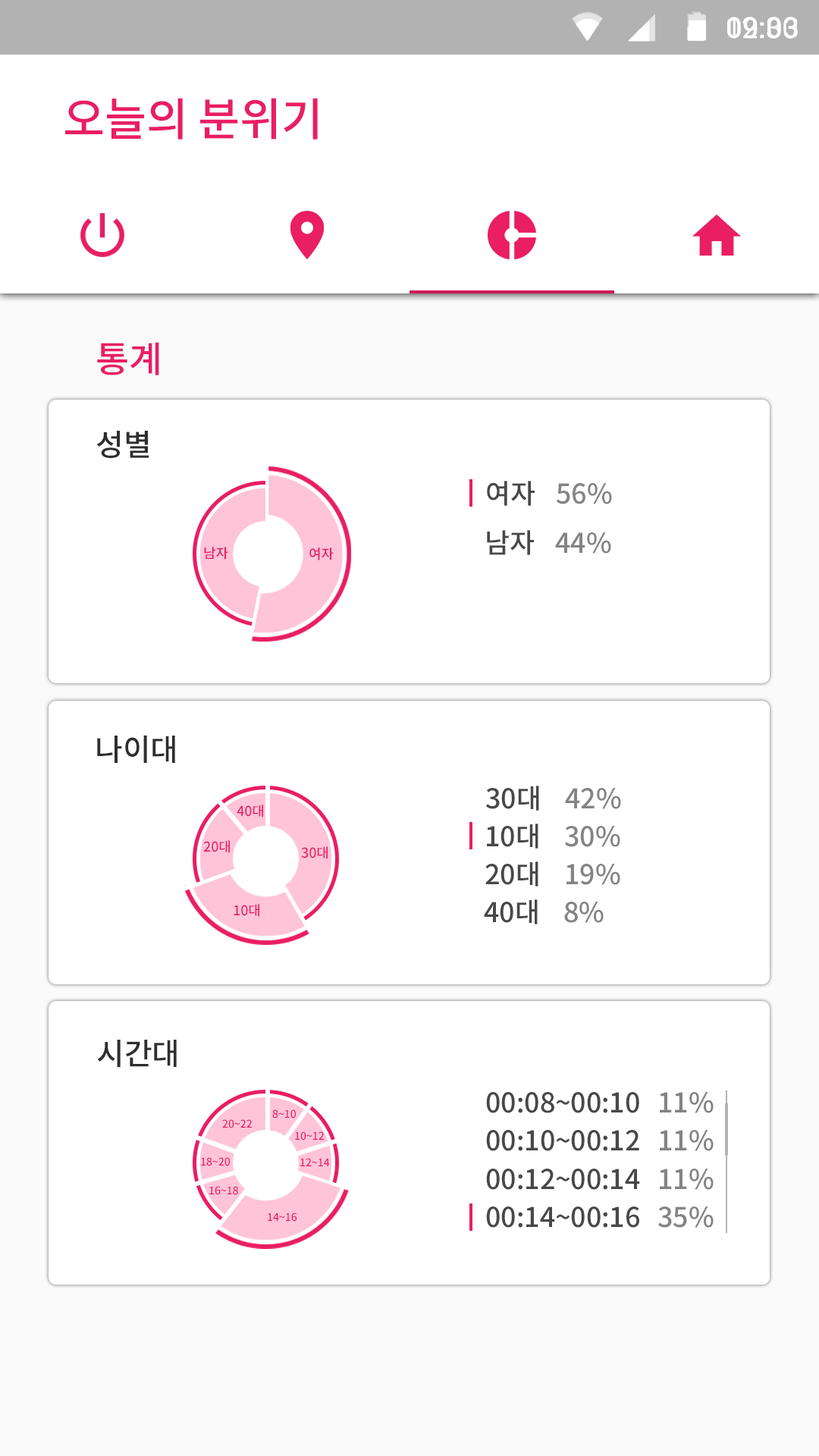
<style>
.page{position:relative;width:819px;height:1456px;background:#ffffff}
.page>*{position:absolute;margin:0}
.t1{font:28.8px "Roboto-Medium";color:#ffffff}
.t2{font:45.5px "NotoSansCJKkr-Medium";letter-spacing:-0.005em;color:#e91e63}
.t3{font:36.4px "NotoSansCJKkr-Medium";letter-spacing:-0.005em;color:#e91e63}
.t4{font:30.3px "NotoSansCJKkr-Medium";letter-spacing:-0.005em;color:#2e2e2e}
.t5{font:27.3px "NotoSansCJKkr-Medium";letter-spacing:-0.005em;color:#484848}
.t6{font:27.3px "NotoSansCJKkr-Medium";letter-spacing:-0.005em;color:#848484}
.t7{font:13.6px "NotoSansCJKkr-Medium";letter-spacing:-0.005em;color:#e91e63}
.t8{font:10.6px "NotoSansCJKkr-Medium";letter-spacing:-0.005em;color:#e91e63}
</style>
<div class="page">
<p class="t1" style="left:727px;top:17px;width:71px;height:22px">09:03</p>
<p class="t2" style="left:65px;top:98px;width:253px;height:42px">오늘의 분위기</p>
<p class="t3" style="left:97px;top:342px;width:62px;height:33px">통계</p>
<p class="t4" style="left:96px;top:431px;width:53px;height:27px">성별</p>
<p class="t5" style="left:487px;top:481px;width:48px;height:25px">여자</p>
<p class="t6" style="left:556px;top:483px;width:56px;height:21px">56%</p>
<p class="t5" style="left:487px;top:530px;width:47px;height:25px">남자</p>
<p class="t6" style="left:555px;top:532px;width:56px;height:22px">44%</p>
<p class="t7" style="left:204px;top:547px;width:24px;height:13px">남자</p>
<p class="t7" style="left:309px;top:548px;width:25px;height:12px">여자</p>
<p class="t4" style="left:97px;top:735px;width:78px;height:28px">나이대</p>
<p class="t5" style="left:486px;top:786px;width:53px;height:25px">30대</p>
<p class="t6" style="left:565px;top:788px;width:56px;height:21px">42%</p>
<p class="t7" style="left:237px;top:805px;width:26px;height:12px">40대</p>
<p class="t5" style="left:487px;top:824px;width:51px;height:25px">10대</p>
<p class="t6" style="left:565px;top:826px;width:55px;height:21px">30%</p>
<p class="t7" style="left:203px;top:840px;width:27px;height:13px">20대</p>
<p class="t7" style="left:301px;top:846px;width:27px;height:13px">30대</p>
<p class="t5" style="left:485px;top:861px;width:53px;height:25px">20대</p>
<p class="t6" style="left:566px;top:864px;width:54px;height:21px">19%</p>
<p class="t7" style="left:234px;top:904px;width:25px;height:13px">10대</p>
<p class="t5" style="left:484px;top:899px;width:54px;height:25px">40대</p>
<p class="t6" style="left:564px;top:902px;width:40px;height:21px">8%</p>
<p class="t4" style="left:97px;top:1040px;width:80px;height:28px">시간대</p>
<p class="t5" style="left:486px;top:1092px;width:153px;height:21px">00:08~00:10</p>
<p class="t6" style="left:660px;top:1092px;width:54px;height:21px">11%</p>
<p class="t8" style="left:272px;top:1109px;width:24px;height:10px">8~10</p>
<p class="t8" style="left:222px;top:1119px;width:30px;height:9px">20~22</p>
<p class="t8" style="left:295px;top:1131px;width:29px;height:10px">10~12</p>
<p class="t5" style="left:486px;top:1130px;width:153px;height:21px">00:10~00:12</p>
<p class="t6" style="left:660px;top:1130px;width:54px;height:21px">11%</p>
<p class="t8" style="left:201px;top:1157px;width:29px;height:9px">18~20</p>
<p class="t8" style="left:300px;top:1158px;width:30px;height:8px">12~14</p>
<p class="t5" style="left:486px;top:1169px;width:154px;height:21px">00:12~00:14</p>
<p class="t6" style="left:660px;top:1169px;width:54px;height:21px">11%</p>
<p class="t8" style="left:209px;top:1186px;width:29px;height:9px">16~18</p>
<p class="t8" style="left:268px;top:1213px;width:29px;height:9px">14~16</p>
<p class="t5" style="left:486px;top:1206px;width:153px;height:22px">00:14~00:16</p>
<p class="t6" style="left:658px;top:1206px;width:56px;height:22px">35%</p>
</div>
